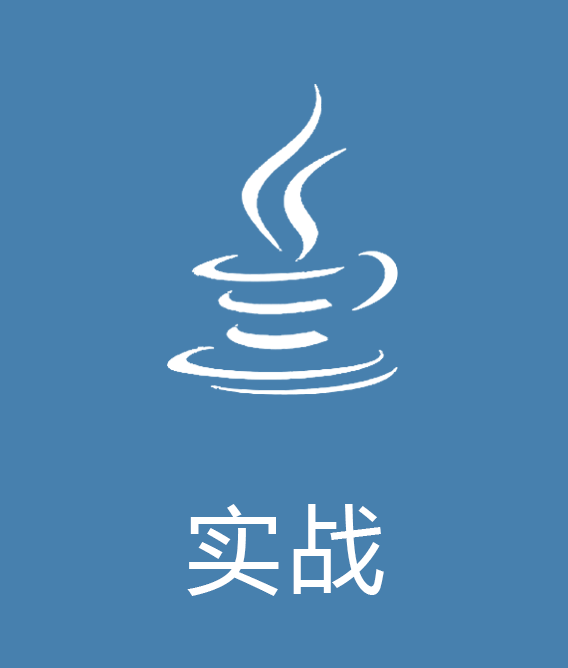
<style>
.page{position:relative;width:568px;height:668px;background:#4780ae}
.page>*{position:absolute;margin:0}
.t1{font:95px "MicrosoftYaHei";letter-spacing:0.08em;color:#ffffff}
</style>
<div class="page">
<p class="t1" style="left:187px;top:504px;width:197px;height:92px">实战</p>
</div>
